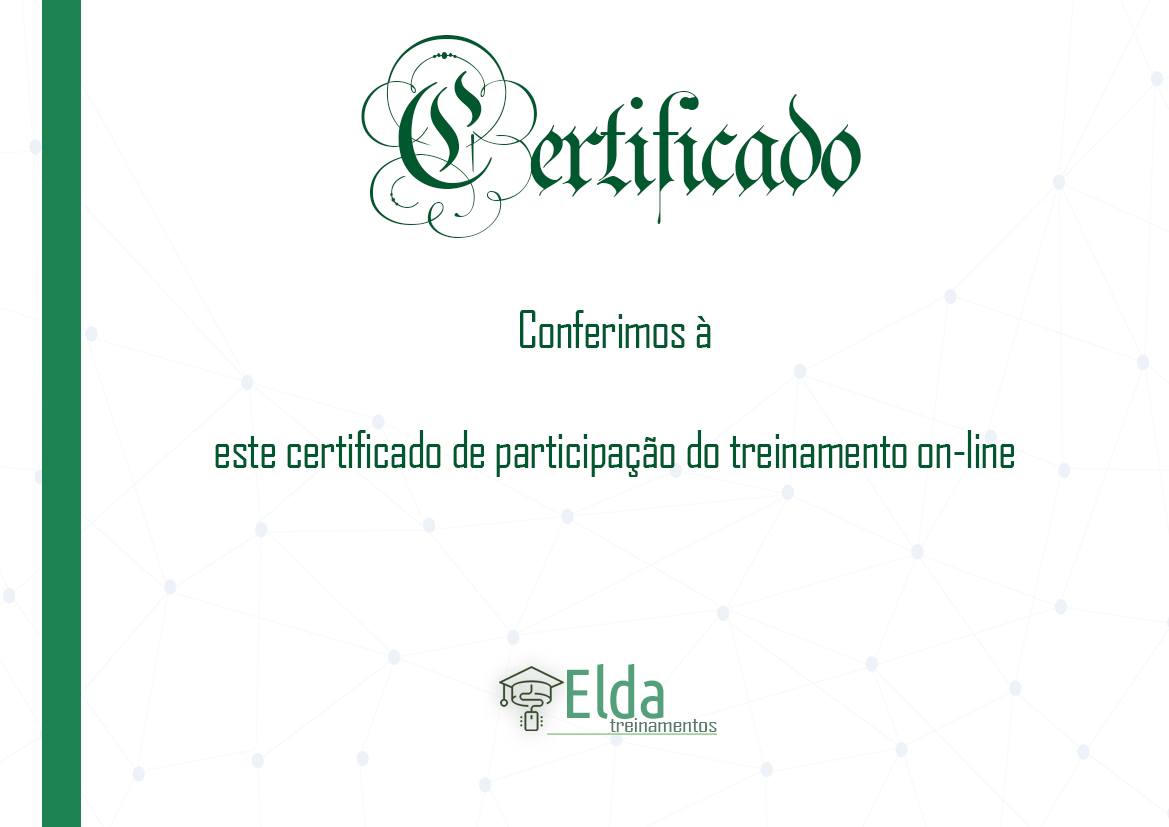
<style>
.page{position:relative;width:1169px;height:827px;background:#ffffff}
.page>*{position:absolute;margin:0}
.t1{font:242.8px "Parchment-Regular";letter-spacing:-0.025em;color:#01582e}
.t2{font:50px "AgencyFB-Reg";letter-spacing:-0.025em;color:#01582e}
.t3{font:69.9px "UbuntuCondensed-Regular";letter-spacing:-0.025em;color:#53a07b}
.t4{font:20.1px "AgencyFB-Reg";letter-spacing:-0.025em;color:#577a69;scale:1.37 1}
</style>
<div class="page">
<p class="t1" style="left:361px;top:35px;width:500px;height:203px">Certificado</p>
<p class="t2" style="left:215px;top:310px;width:799px;height:167px;text-align:center">Conferimos à<br><br>este certificado de participação do treinamento on-line</p>
<p class="t3" style="left:567px;top:663px;width:97px;height:56px">Elda</p>
<p class="t4" style="left:609px;top:718px;width:108px;height:14px">treinamentos</p>
</div>
